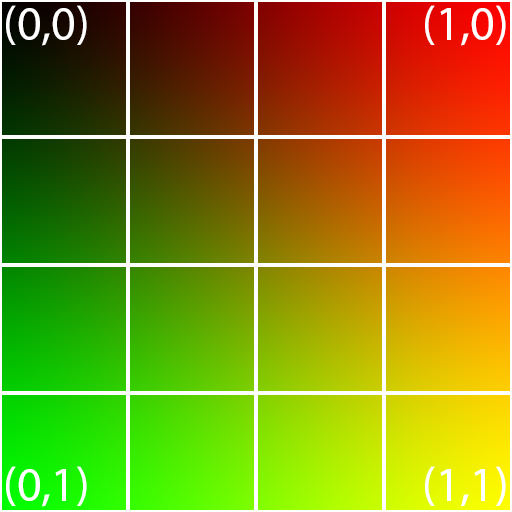
<style>
.page{position:relative;width:512px;height:512px}
.page>*{position:absolute;margin:0}
.t1{font:48px "MyriadPro-Regular";color:#ffffff}
</style>
<div class="page">
<p class="t1" style="left:6px;top:5px;width:81px;height:41px">(0,0)</p>
<p class="t1" style="left:425px;top:5px;width:81px;height:41px">(1,0)</p>
<p class="t1" style="left:6px;top:466px;width:81px;height:41px">(0,1)</p>
<p class="t1" style="left:425px;top:466px;width:81px;height:41px">(1,1)</p>
</div>
